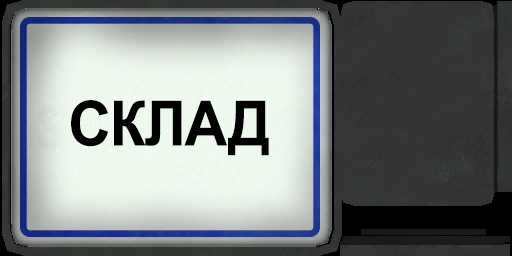
<style>
.page{position:relative;width:512px;height:256px}
.page>*{position:absolute;margin:0}
.t1{font:62px "Arial-BoldMT";letter-spacing:-0.02em;color:#000000;scale:0.95 1}
</style>
<div class="page">
<p class="t1" style="left:71px;top:100px;width:198px;height:56px">СКЛАД</p>
</div>
